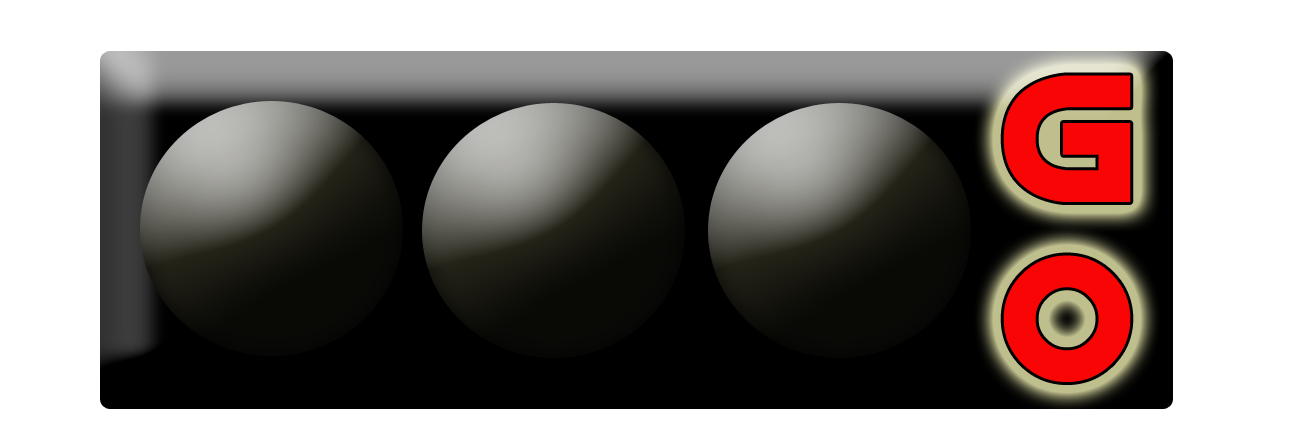
<style>
.page{position:relative;width:1296px;height:432px;background:#ffffff}
.page>*{position:absolute;margin:0}
.t1{font:150px "VertigoUpright2BRK";color:#fa0505}
</style>
<div class="page">
<p class="t1" style="left:1003px;top:75px;width:128px;height:307px;text-align:center">G<br>O</p>
</div>
